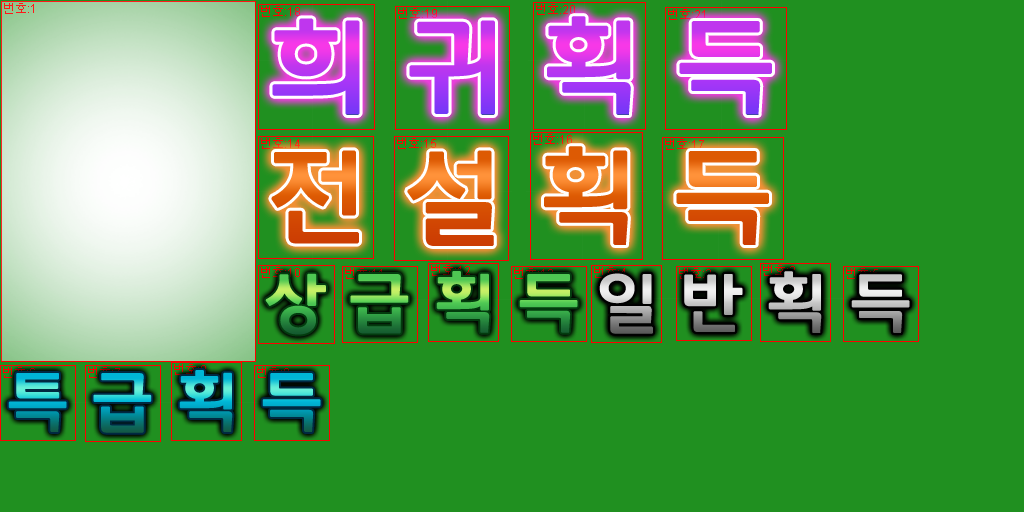
<style>
.page{position:relative;width:1024px;height:512px;background:#209020}
.page>*{position:absolute;margin:0}
.t1{font:100px "Daum_Regular";font-weight:bold}
.t2{font:100px "Daum_Regular";color:#dd5a03;font-weight:bold}
.t3{font:62.5px "Daum_Regular";font-weight:bold}
</style>
<div class="page">
<p class="t1" style="left:272px;top:16px;width:500px;height:99px">희 귀 획 득</p>
<p class="t2" style="left:271px;top:146px;width:498px;height:100px">전 설 획 득</p>
<p class="t3" style="left:265px;top:271px;width:313px;height:64px">상 급 획 득</p>
<p class="t3" style="left:599px;top:271px;width:311px;height:63px">일 반 획 득</p>
<p class="t3" style="left:8px;top:370px;width:313px;height:63px">특 급 획 득</p>
</div>
